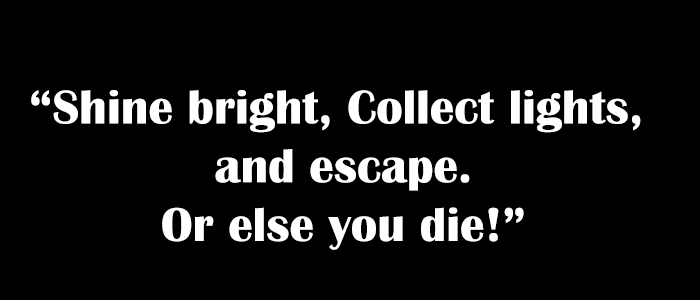
<style>
.page{position:relative;width:700px;height:300px;background:#000000}
.page>*{position:absolute;margin:0}
.t1{font:49px "BritannicBold";color:#ffffff}
</style>
<div class="page">
<p class="t1" style="left:31px;top:90px;width:610px;height:160px;text-align:center">“Shine bright, Collect lights, <br>and escape.<br>Or else you die!”</p>
</div>
